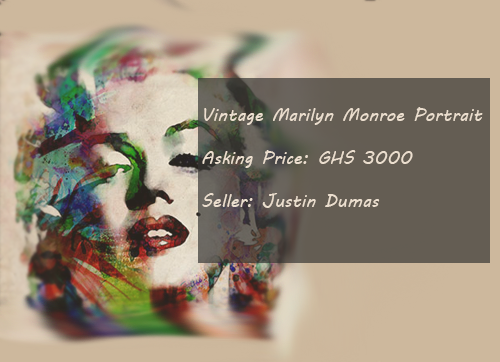
<style>
.page{position:relative;width:500px;height:362px;background:#cdb89d}
.page>*{position:absolute;margin:0}
.t1{font:18px "MVBoli";color:#ebdece}
</style>
<div class="page">
<p class="t1" style="left:202px;top:107px;width:281px;height:101px">Vintage Marilyn Monroe Portrait<br><br>Asking Price: GHS 3000<br><br>Seller: Justin Dumas</p>
</div>
